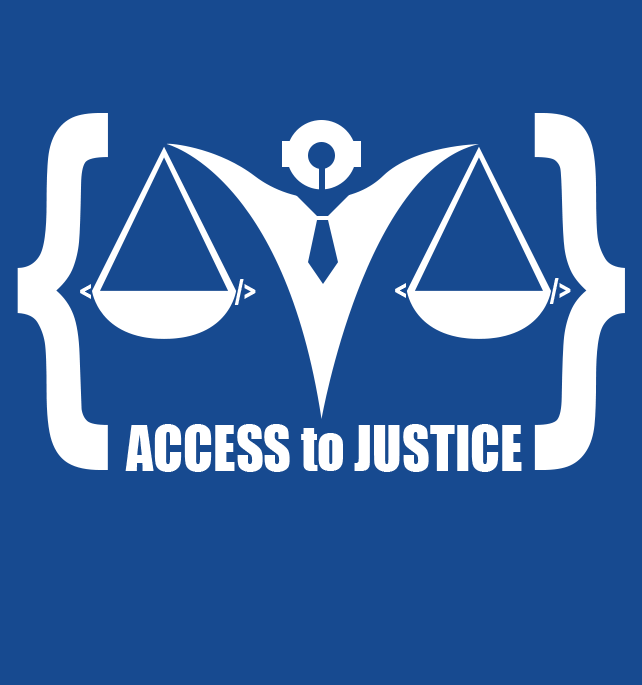
<style>
.page{position:relative;width:642px;height:685px;background:#174a90}
.page>*{position:absolute;margin:0}
.t1{font:380.7px "Impact";color:#ffffff;scale:0.71 1}
.t2{font:32.4px "Impact";color:#ffffff;scale:0.71 1}
.t3{font:58.3px "Impact";color:#ffffff;scale:0.93 1}
</style>
<div class="page">
<p class="t1" style="left:17px;top:113px;width:91px;height:357px">{</p>
<p class="t1" style="left:534px;top:113px;width:91px;height:357px">}</p>
<p class="t2" style="left:234px;top:279px;width:22px;height:26px;rotate:180deg">&lt;/</p>
<p class="t2" style="left:549px;top:278px;width:22px;height:26px;rotate:180deg">&lt;/</p>
<p class="t2" style="left:80px;top:284px;width:11px;height:15px">&lt;</p>
<p class="t2" style="left:395px;top:283px;width:11px;height:15px">&lt;</p>
<p class="t3" style="left:125px;top:424px;width:397px;height:48px">ACCESS to JUSTICE</p>
</div>
